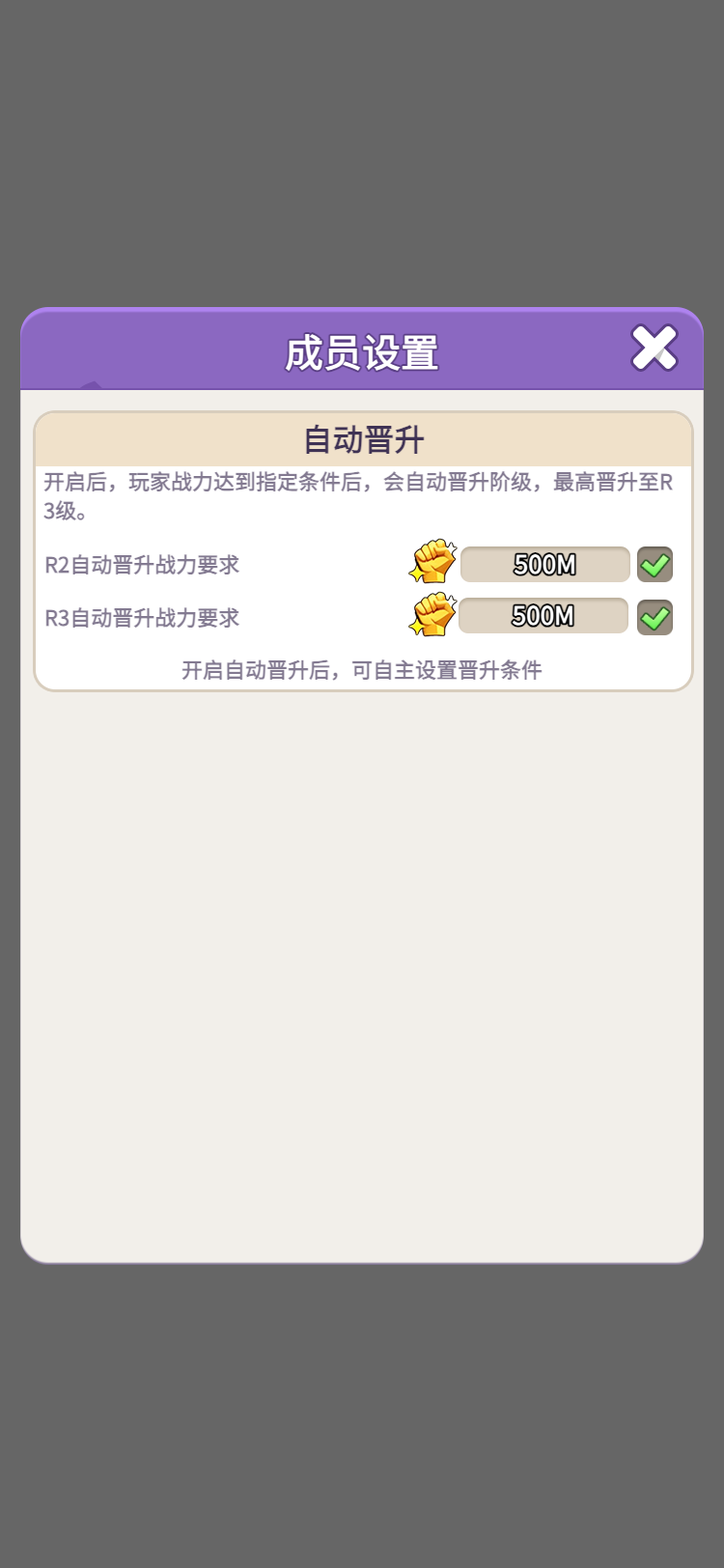
<style>
.page{position:relative;width:724px;height:1568px;background:#666666}
.page>*{position:absolute;margin:0}
.t1{font:38.6px "WebPSD-18463539-0-Regular";color:#ffffff;font-weight:bold}
.t2{font:30.9px/30.9px "WebPSD-18463539-0-Regular";color:#3f3254;font-weight:bold}
.t3{font:21.2px/29px "WebPSD-18463539-0-Regular";color:#837a91;font-weight:bold}
.t4{font:21.2px "WebPSD-18463539-0-Regular";color:#837a91;font-weight:bold}
</style>
<div class="page">
<p class="t1" style="left:107px;top:324px;width:510px;height:56px">成员设置</p>
<p class="t2" style="left:36px;top:413px;width:655px;height:53px;text-align:center">自动晋升</p>
<p class="t3" style="left:43px;top:471px;width:638px;height:58px">开启后，玩家战力达到指定条件后，会自动晋升阶级，最高晋升至R <br>3级。</p>
<p class="t4" style="left:44px;top:554px;width:213px;height:21px">R2自动晋升战力要求</p>
<p class="t4" style="left:44px;top:607px;width:213px;height:22px">R3自动晋升战力要求</p>
<p class="t4" style="left:69px;top:658px;width:587px;height:24px">开启自动晋升后，可自主设置晋升条件</p>
</div>
